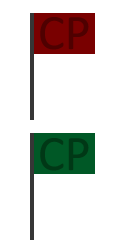
<style>
.page{position:relative;width:120px;height:240px;background:#ffffff}
.page>*{position:absolute;margin:0}
.t1{font:50px "Calibri";color:#4f0000}
.t2{font:50px "Calibri";color:#003816}
</style>
<div class="page">
<p class="t1" style="left:40px;top:17px;width:49px;height:33px">CP</p>
<p class="t2" style="left:40px;top:138px;width:49px;height:33px">CP</p>
</div>
